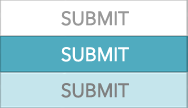
<style>
.page{position:relative;width:188px;height:108px;background:#ffffff}
.page>*{position:absolute;margin:0}
.t1{font:18.7px "AvenirNextLTPro-Regular";letter-spacing:-0.025em;color:#989898;text-transform:uppercase;font-weight:bold}
.t2{font:18.7px "AvenirNextLTPro-Regular";letter-spacing:-0.025em;color:#ffffff;text-transform:uppercase;font-weight:bold}
.t3{font:18.7px "AvenirNextLTPro-Regular";letter-spacing:-0.025em;color:#7f7f7f;text-transform:uppercase;font-weight:bold}
</style>
<div class="page">
<p class="t1" style="left:61px;top:11px;width:68px;height:15px">submit</p>
<p class="t2" style="left:61px;top:47px;width:68px;height:15px">submit</p>
<p class="t3" style="left:61px;top:83px;width:68px;height:15px">submit</p>
</div>
